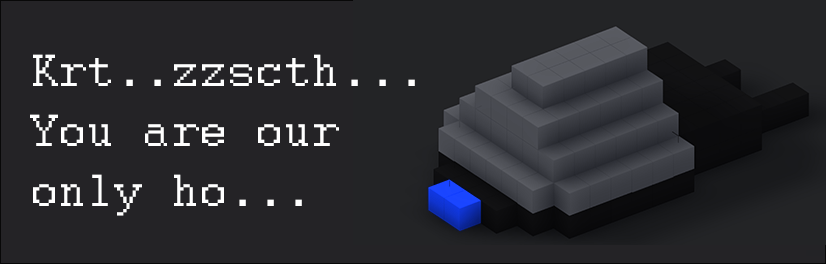
<style>
.page{position:relative;width:826px;height:264px;background:#242326}
.page>*{position:absolute;margin:0}
.t1{font:50px "Courier";color:#ffffff}
</style>
<div class="page">
<p class="t1" style="left:30px;top:54px;width:385px;height:162px">Krt..zzscth...<br>You are our<br>only ho...</p>
</div>
